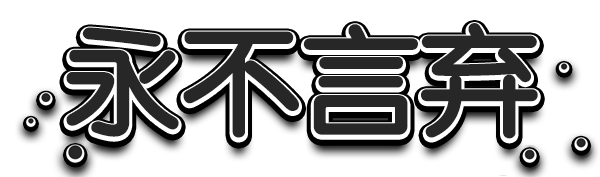
<style>
.page{position:relative;width:600px;height:177px;background:#ffffff}
.page>*{position:absolute;margin:0}
.t1{font:116.2px "FZY3JW--GB1-0";color:#272727;font-weight:bold}
</style>
<div class="page">
<p class="t1" style="left:66px;top:25px;width:472px;height:116px">永不言弃</p>
<p class="t1" style="left:66px;top:23px;width:472px;height:116px">永不言弃</p>
</div>
